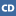
<style>
.page{position:relative;width:16px;height:16px;background:#3d699f}
.page>*{position:absolute;margin:0}
.t1{font:10px "MyriadPro-Bold";color:#ffffff}
</style>
<div class="page">
<p class="t1" style="left:1px;top:4px;width:14px;height:8px">CD</p>
</div>
